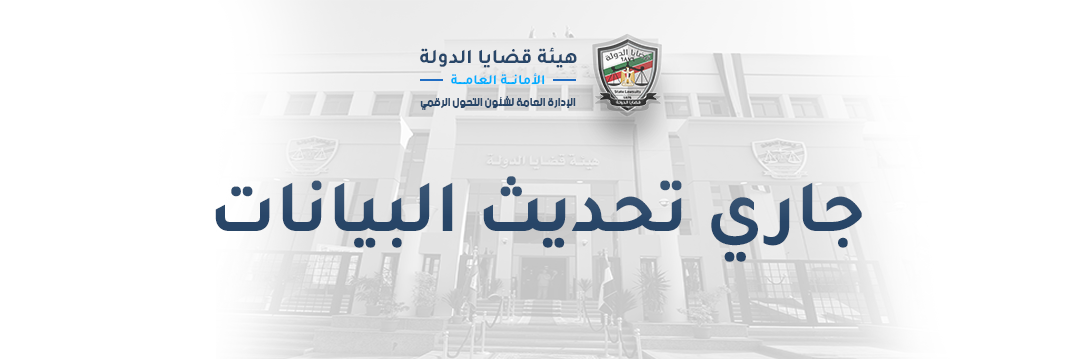
<style>
.page{position:relative;width:1078px;height:359px;background:#ffffff}
.page>*{position:absolute;margin:0}
.t1{font:20.6px "Tajawal-Bold";color:#284668}
.t2{font:14.1px "Tajawal-Bold";color:#00aeff}
.t3{font:12px "beINBlack";color:#284668}
.t4{font:74.7px "Tajawal-Bold";color:#284668}
</style>
<div class="page">
<p class="t1" style="left:420px;top:47px;width:157px;height:21px">هيئة قضايا الدولة</p>
<p class="t2" style="left:451px;top:73px;width:94px;height:12px">الأمانـــة العامــــة</p>
<p class="t3" style="left:420px;top:96px;width:156px;height:14px">الإدارة العامة لشئون التحول الرقمي</p>
<p class="t4" style="left:215px;top:176px;width:647px;height:86px">جاري تحديث البيانات</p>
</div>
